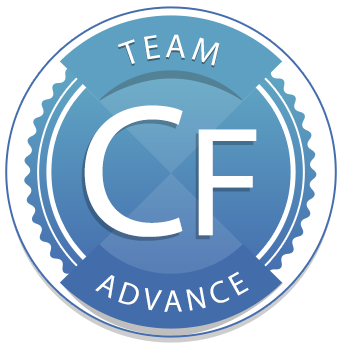
<style>
.page{position:relative;width:342px;height:344px;background:#ffffff}
.page>*{position:absolute;margin:0}
.t1{font:33.7px "MyriadPro-Regular";letter-spacing:0.1em;color:#ffffff}
.t2{font:189.3px "MyriadPro-Regular";color:#ffffff}
.t3{font:156.4px "MyriadPro-Regular";color:#ffffff}
.t4{font:31.3px "MyriadPro-Regular";letter-spacing:0.16em;color:#ffffff}
</style>
<div class="page">
<p class="t1" style="left:118px;top:34px;width:102px;height:32px">TEAM</p>
<p class="t2" style="left:84px;top:105px;width:173px;height:132px">C<span class="t3">F</span></p>
<p class="t4" style="left:95px;top:271px;width:154px;height:41px">ADVANCE</p>
</div>
